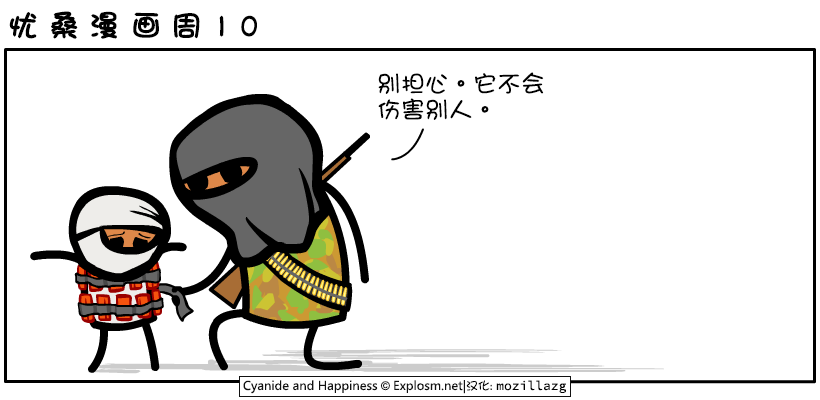
<style>
.page{position:relative;width:820px;height:400px;background:#ffffff}
.page>*{position:absolute;margin:0}
.t1{font:30px "DFGirl";letter-spacing:0.34em;color:#000000;font-weight:bold}
.t2{font:24px/26px "DFGirl";color:#000000}
</style>
<div class="page">
<p class="t1" style="left:9px;top:11px;width:248px;height:28px">忧桑漫画周10</p>
<p class="t2" style="left:378px;top:72px;width:166px;height:48px">别担心。它不会<br>伤害别人。</p>
</div>
